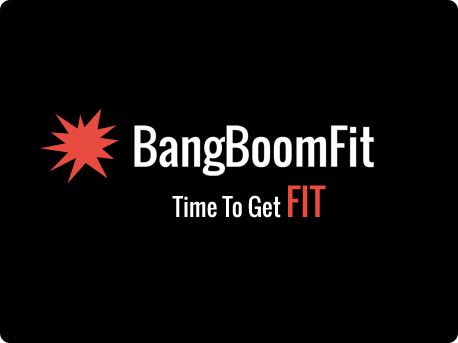
<style>
.page{position:relative;width:458px;height:343px;background:#000000}
.page>*{position:absolute;margin:0}
.t1{font:47px "Oswald-Regular";color:#ffffff}
.t2{font:24px "Oswald-Regular";color:#fefefe}
.t3{font:36px "Oswald-Regular";color:#e74c3c}
</style>
<div class="page">
<p class="t1" style="left:134px;top:125px;width:240px;height:51px">BangBoomFit</p>
<p class="t2" style="left:172px;top:185px;width:154px;height:33px">Time To Get <span class="t3">FIT</span></p>
</div>
